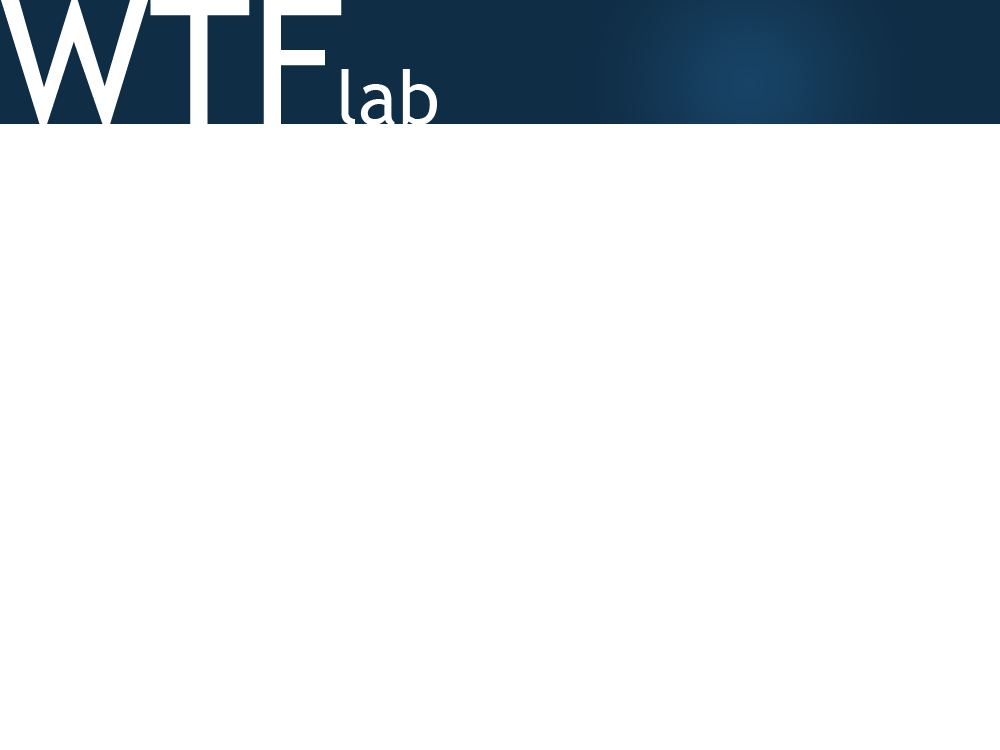
<style>
.page{position:relative;width:1000px;height:750px;background:#ffffff}
.page>*{position:absolute;margin:0}
.t1{font:175px "TrebuchetMS";color:#ffffff}
.t2{font:75px "TrebuchetMS";color:#ffffff}
</style>
<div class="page">
<p class="t1" style="left:1px;top:0px;width:341px;height:127px">WTF</p>
<p class="t2" style="left:341px;top:69px;width:96px;height:56px">lab</p>
</div>
